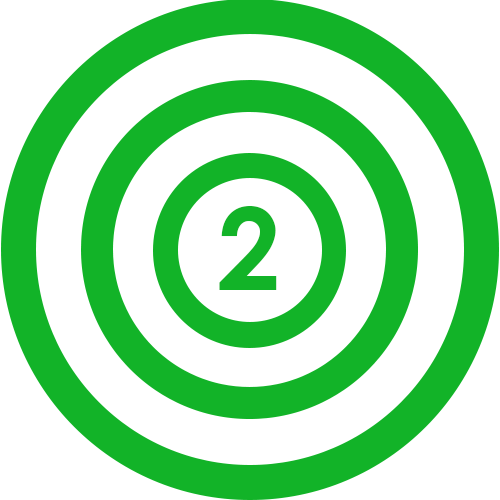
<style>
.page{position:relative;width:500px;height:500px;background:#ffffff}
.page>*{position:absolute;margin:0}
.t1{font:113.7px "CenturyGothic-Bold";color:#12b328}
</style>
<div class="page">
<p class="t1" style="left:219px;top:206px;width:58px;height:84px">2</p>
</div>
